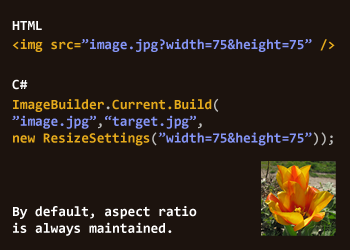
<style>
.page{position:relative;width:350px;height:250px;background:#1c130e}
.page>*{position:absolute;margin:0}
.t1{font:14px "Consolas-Bold";color:#ffffff}
.t2{font:14px "Consolas-Bold";color:#8595f6}
.t3{font:14px "Consolas-Bold";color:#e5aa1c}
.t4{font:14px "Consolas-Bold";color:#bbbbba}
</style>
<div class="page">
<p class="t1" style="left:12px;top:21px;width:30px;height:9px">HTML</p>
<p class="t2" style="left:12px;top:39px;width:323px;height:13px"><span class="t3">&lt;img src=</span>”image.jpg?width=75&amp;height=75” <span class="t3">/&gt;</span></p>
<p class="t1" style="left:12px;top:79px;width:16px;height:11px">C#</p>
<p class="t2" style="left:12px;top:98px;width:321px;height:48px"><span class="t3">ImageBuilder</span><span class="t4">.</span><span class="t3">Current.Build</span><span class="t4">(<br></span>”image.jpg”<span class="t4">,</span>“target.jpg”<span class="t4">,<br></span><span class="t3">new ResizeSettings</span><span class="t4">(</span>”width=75&amp;height=75”<span class="t4">));</span></p>
<p class="t1" style="left:13px;top:206px;width:184px;height:30px">By default, aspect ratio<br>is always maintained.</p>
</div>
